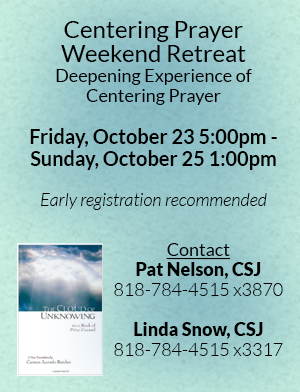
<style>
.page{position:relative;width:300px;height:392px}
.page>*{position:absolute;margin:0}
.t1{font:20px/22px "Lato-Bold";color:#000000}
.t2{font:24px/24px "Lato-Regular";color:#000000}
.t3{font:18px/20px "Lato-Regular";color:#000000}
.t4{font:18px/20px "Lato-LightItalic";color:#000000}
.t5{font:18px/20px "Lato-Light";color:#000000}
.t6{font:18px/20px "Lato-Regular";color:#000000;text-decoration:underline}
.t7{font:18px/20px "Lato-Black";color:#000000}
</style>
<div class="page">
<p class="t1" style="left:30px;top:21px;width:247px;height:189px;text-align:center"><span class="t2">Centering Prayer Weekend Retreat<br></span><span class="t3">Deepening Experience of Centering Prayer<br><br></span>Friday, October 23 5:00pm - <br>Sunday, October 25 1:00pm<br><br><span class="t4">Early registration recommended</span></p>
<p class="t5" style="left:114px;top:243px;width:169px;height:113px;text-align:center"><span class="t6">Contact<br></span><span class="t7">Pat Nelson, CSJ<br></span>818-784-4515 x3870<br><br><span class="t7">Linda Snow, CSJ<br></span>818-784-4515 x3317</p>
</div>
